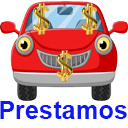
<style>
.page{position:relative;width:128px;height:128px;background:#ffffff}
.page>*{position:absolute;margin:0}
.t1{font:25.3px "Arial-BoldMT";color:#0d18f3}
</style>
<div class="page">
<p class="t1" style="left:0px;top:101px;width:127px;height:18px">Prestamos</p>
</div>
